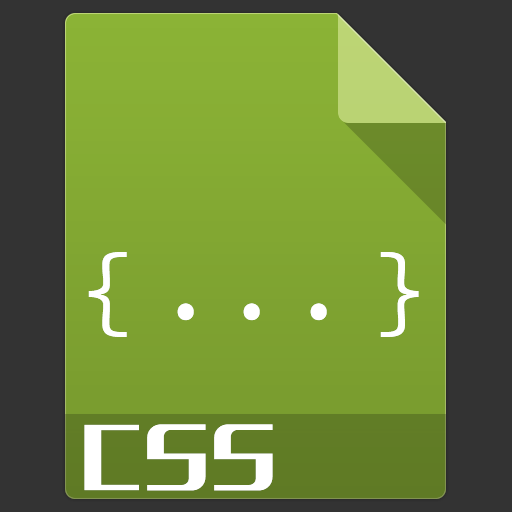
<style>
.page{position:relative;width:512px;height:512px;background:#333333}
.page>*{position:absolute;margin:0}
.t1{font:99px "SourceCodeProYaHeiHybrid";letter-spacing:0.07em;color:#ffffff}
.t2{font:99px "SourceCodePro-Regular";letter-spacing:0.07em;color:#ffffff}
.t3{font:72px "MFLiHei_Noncommercial-Regular";letter-spacing:0.07em;color:#ffffff}
</style>
<div class="page">
<p class="t1" style="left:88px;top:252px;width:331px;height:85px">{    }</p>
<p class="t2" style="left:177px;top:303px;width:150px;height:18px">...</p>
<p class="t3" style="left:84px;top:424px;width:189px;height:67px">CSS</p>
</div>
